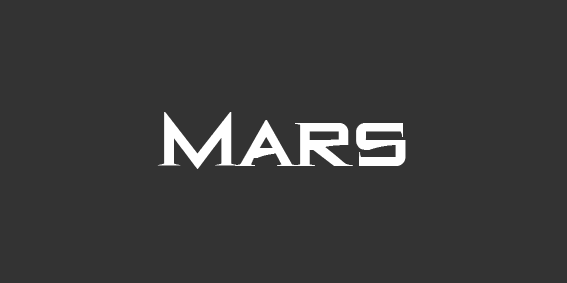
<style>
.page{position:relative;width:567px;height:283px;background:#333333}
.page>*{position:absolute;margin:0}
.t1{font:100px "BlackHoleBB";color:#ffffff}
</style>
<div class="page">
<p class="t1" style="left:157px;top:112px;width:249px;height:57px">Mars</p>
</div>
